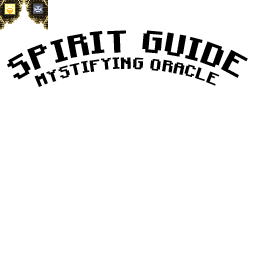
<style>
.page{position:relative;width:256px;height:256px;background:#ffffff}
.page>*{position:absolute;margin:0}
.t1{font:31.2px "Minecraft-Bold";color:#000000}
.t2{font:16.2px "Minecraft-Bold";color:#000000}
</style>
<div class="page">
<p class="t1" style="left:7px;top:30px;width:241px;height:50px">SPIRIT GUIDE</p>
<p class="t2" style="left:34px;top:57px;width:186px;height:30px;text-align:center">MYSTIFYING ORACLE</p>
</div>
